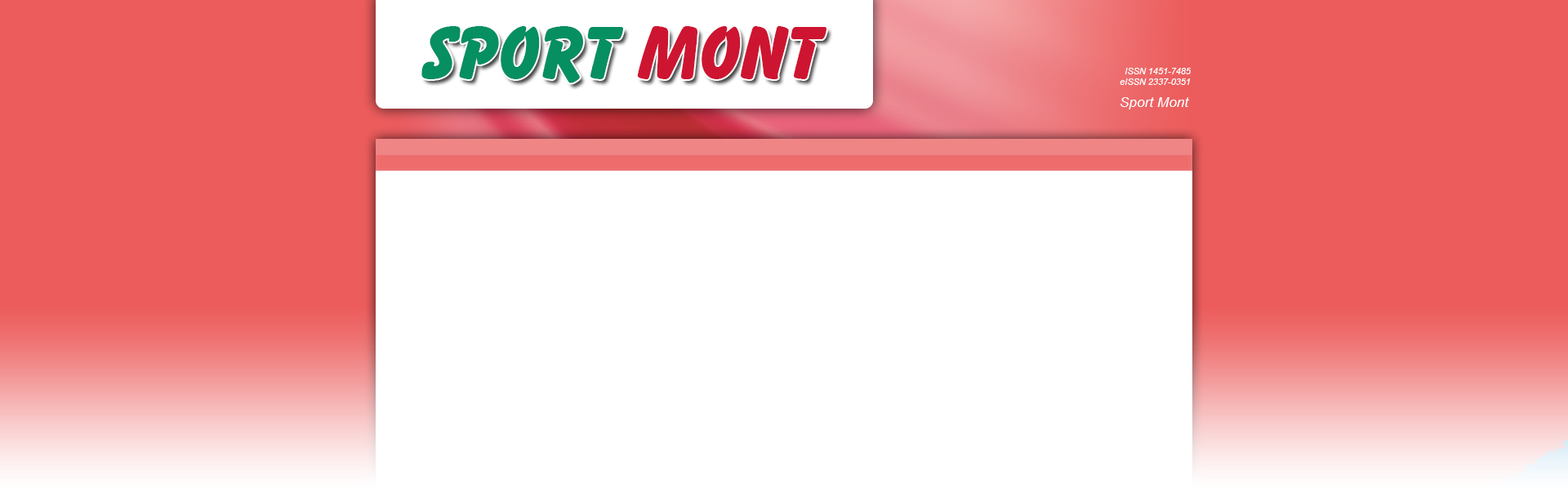
<style>
.page{position:relative;width:1568px;height:490px;background:#ffffff}
.page>*{position:absolute;margin:0}
.t1{font:75.9px "BalloonBT-ExtraBold";color:#068f61}
.t2{font:75.9px "BalloonBT-ExtraBold";color:#cd1531}
.t3{font:8.8px/10.1px "Arial-ItalicMT";color:#ffffff}
.t4{font:14px "Arial-ItalicMT";color:#ffffff}
</style>
<div class="page">
<p class="t1" style="left:421px;top:26px;width:202px;height:57px">SPORT</p>
<p class="t2" style="left:637px;top:26px;width:189px;height:53px">MONT</p>
<p class="t3" style="left:1120px;top:68px;width:71px;height:17px">ISSN 1451-7485<br>eISSN 2337-0351</p>
<p class="t4" style="left:1120px;top:97px;width:69px;height:12px">Sport Mont</p>
</div>
